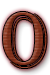
<style>
.page{position:relative;width:50px;height:75px;background:#ffffff}
.page>*{position:absolute;margin:0}
.t1{font:81px "Algerian"}
</style>
<div class="page">
<p class="t1" style="left:3px;top:12px;width:44px;height:56px">0</p>
</div>
